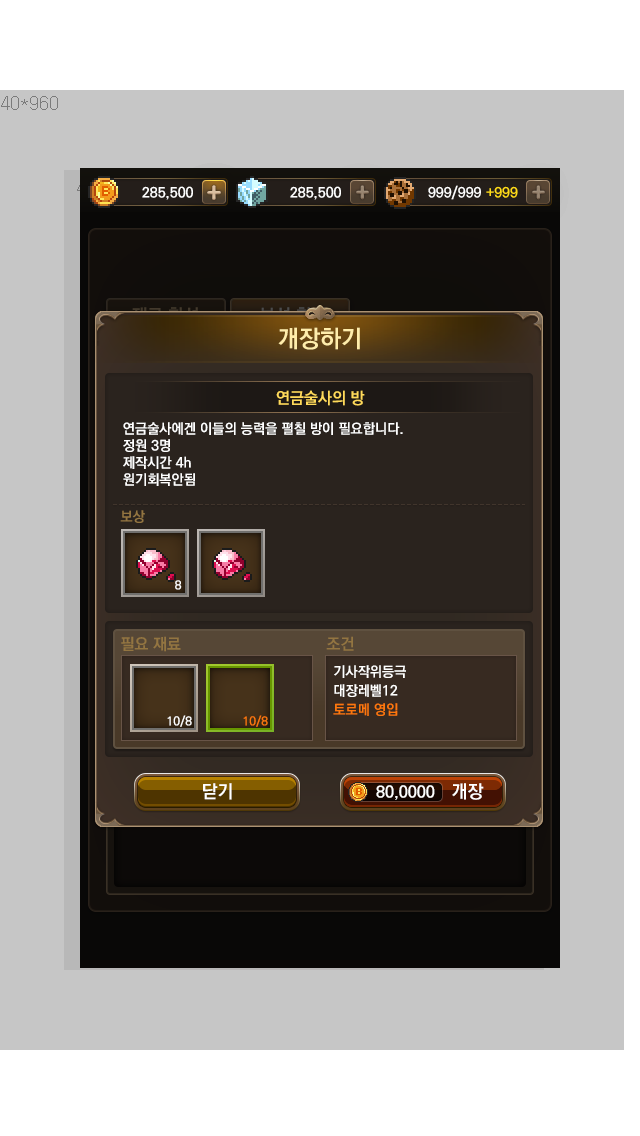
<style>
.page{position:relative;width:640px;height:1136px;background:#c6c6c6}
.page>*{position:absolute;margin:0}
.t1{font:24px "KoPubDotumBold";color:#ffedab}
.t2{font:16px "KoPubDotumBold";color:#ffda5b}
.t3{font:14px "KoPubDotumBold";color:#ffffff}
.t4{font:14px "KoPubDotumBold";color:#937541}
.t5{font:12px "KoPubDotumBold";color:#ffffff}
.t6{font:16px "KoPubDotumBold";color:#937541}
.t7{font:14px/19px "KoPubDotumBold";color:#fffffe}
.t8{font:14px/19px "KoPubDotumBold";color:#fe770c}
.t9{font:12px "KoPubDotumBold";color:#fe770c}
.t10{font:18px "KoPubDotumBold";color:#ffffff}
.t11{font:16px "KoPubDotumBold";color:#ffffff}
</style>
<div class="page">
<p class="t1" style="left:278px;top:327px;width:82px;height:23px">개장하기</p>
<p class="t2" style="left:276px;top:390px;width:89px;height:16px">연금술사의 방</p>
<p class="t3" style="left:123px;top:422px;width:280px;height:64px">연금술사에겐 이들의 능력을 펼칠 방이 필요합니다. <br>정원 3명 <br>제작시간 4h<br>원기회복안됨</p>
<p class="t4" style="left:120px;top:510px;width:25px;height:13px">보상</p>
<p class="t5" style="left:175px;top:580px;width:7px;height:10px">8</p>
<p class="t6" style="left:121px;top:636px;width:60px;height:16px">필요 재료</p>
<p class="t6" style="left:326px;top:636px;width:28px;height:15px">조건</p>
<p class="t7" style="left:333px;top:665px;width:73px;height:51px">기사작위등극 <br>대장레벨12<br><span class="t8">토로메 영입</span></p>
<p class="t5" style="left:167px;top:715px;width:25px;height:12px">10/8</p>
<p class="t9" style="left:243px;top:715px;width:25px;height:12px">10/8</p>
<p class="t10" style="left:203px;top:783px;width:29px;height:17px">닫기</p>
<p class="t11" style="left:376px;top:785px;width:59px;height:15px">80,0000</p>
<p class="t10" style="left:452px;top:783px;width:32px;height:17px">개장</p>
</div>
